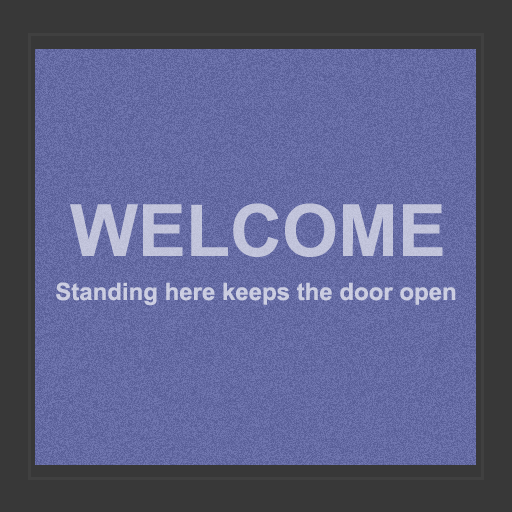
<style>
.page{position:relative;width:512px;height:512px;background:#383838}
.page>*{position:absolute;margin:0}
.t1{font:72px "Arial-BoldMT";color:#c1c4db}
.t2{font:24px "Arial-BoldMT";color:#cacde0}
</style>
<div class="page">
<p class="t1" style="left:70px;top:203px;width:373px;height:54px">WELCOME</p>
<p class="t2" style="left:56px;top:282px;width:400px;height:24px">Standing here keeps the door open</p>
</div>
